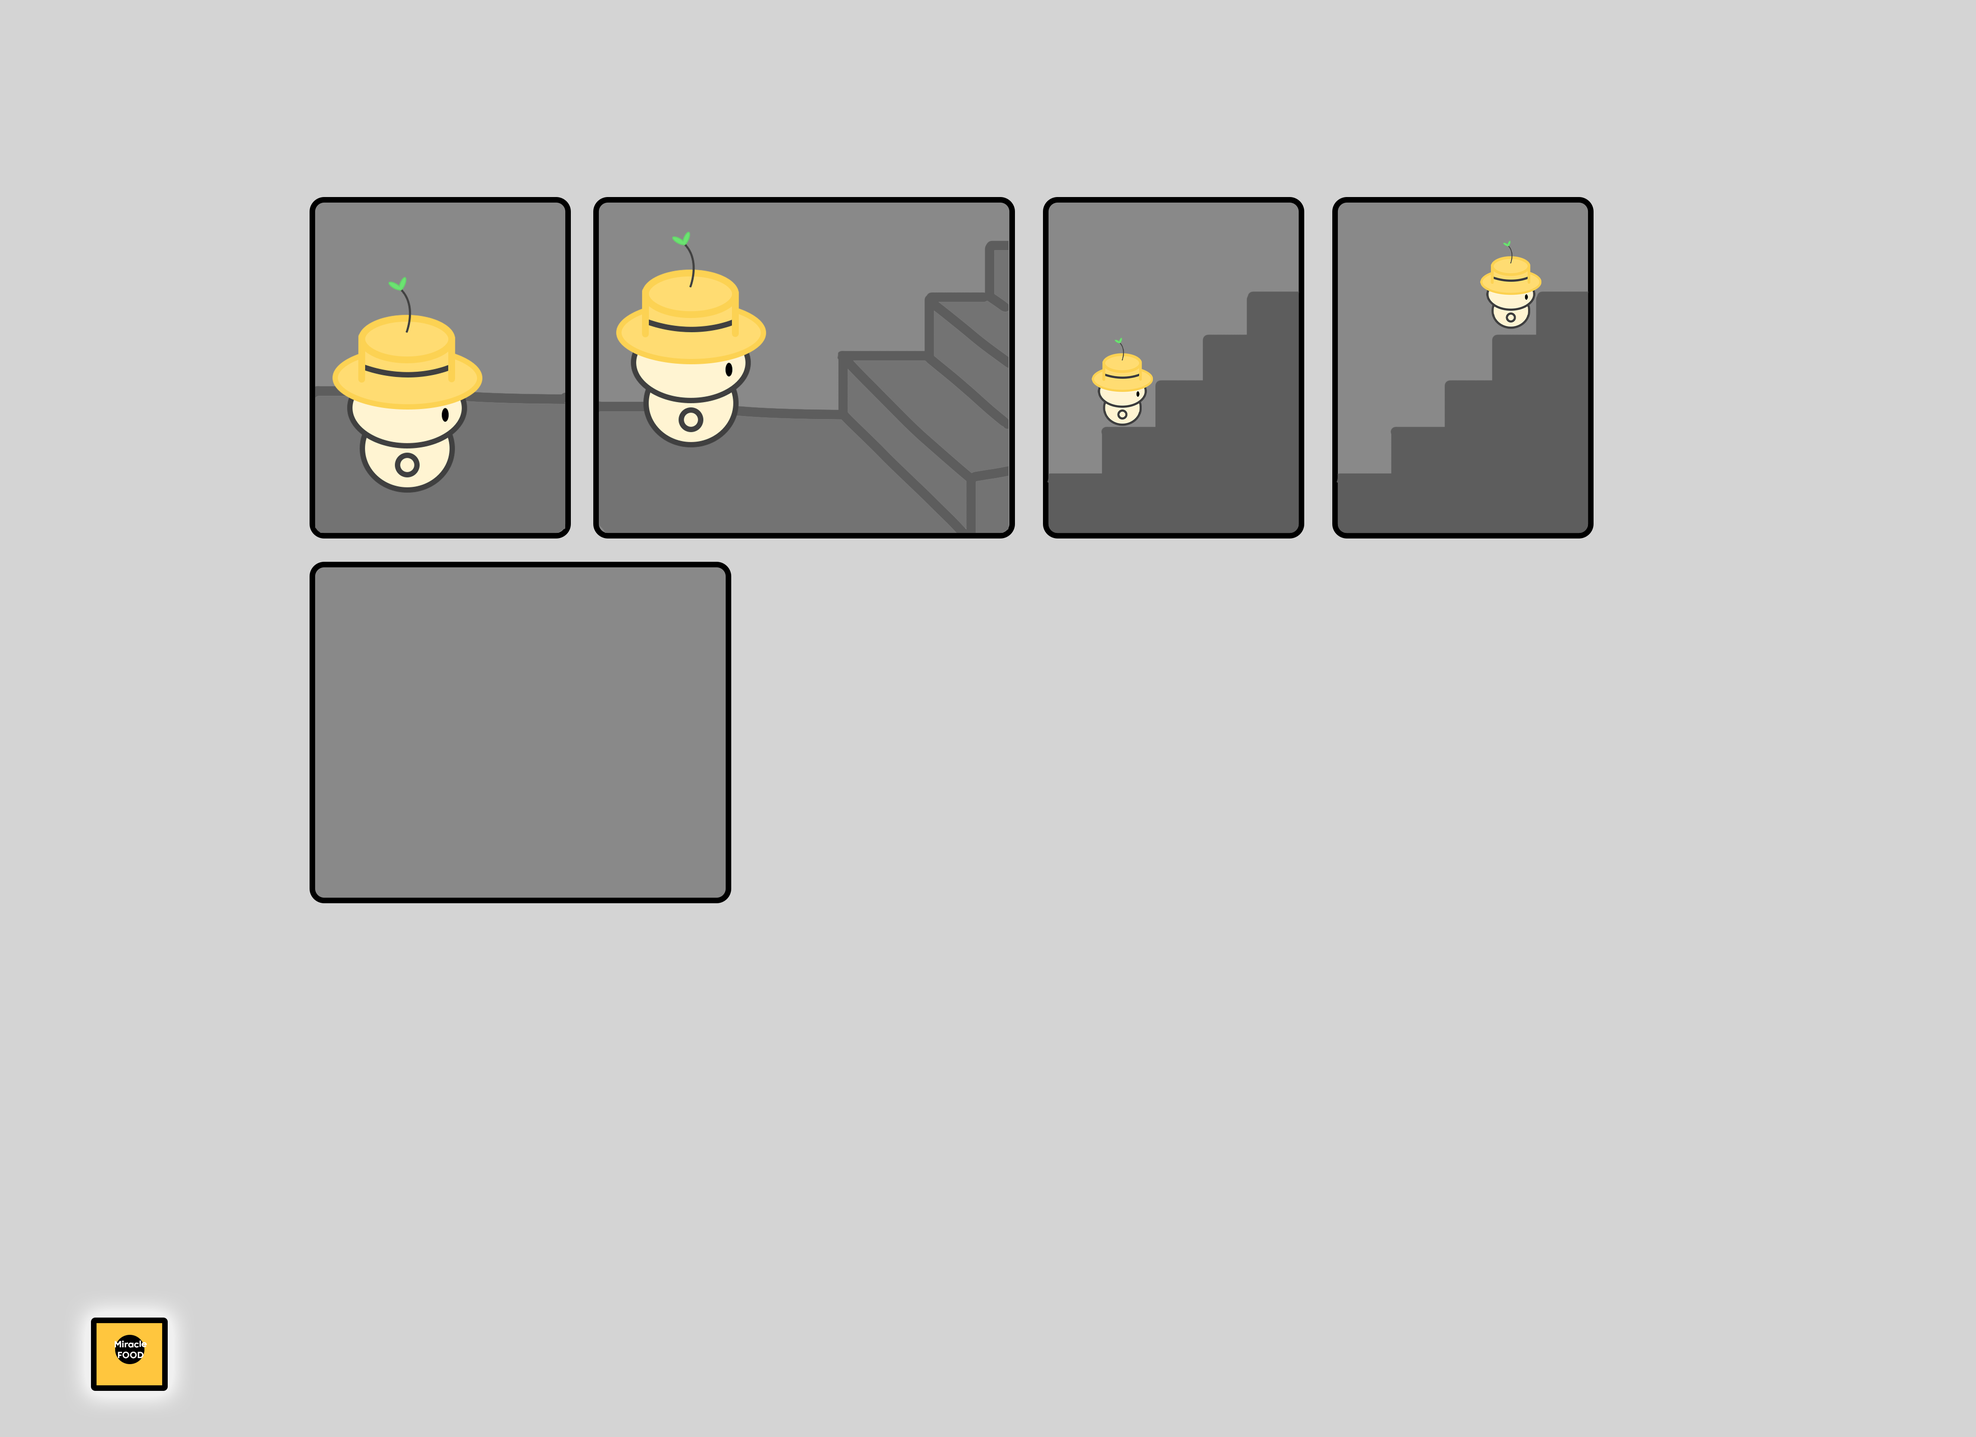
<style>
.page{position:relative;width:1976px;height:1437px;background:#d4d4d4}
.page>*{position:absolute;margin:0}
.t1{font:9px "Retroica";color:#fffefe}
</style>
<div class="page">
<p class="t1" style="left:115px;top:1340px;width:32px;height:19px;text-align:center">Miracle <br>FOOD</p>
</div>
